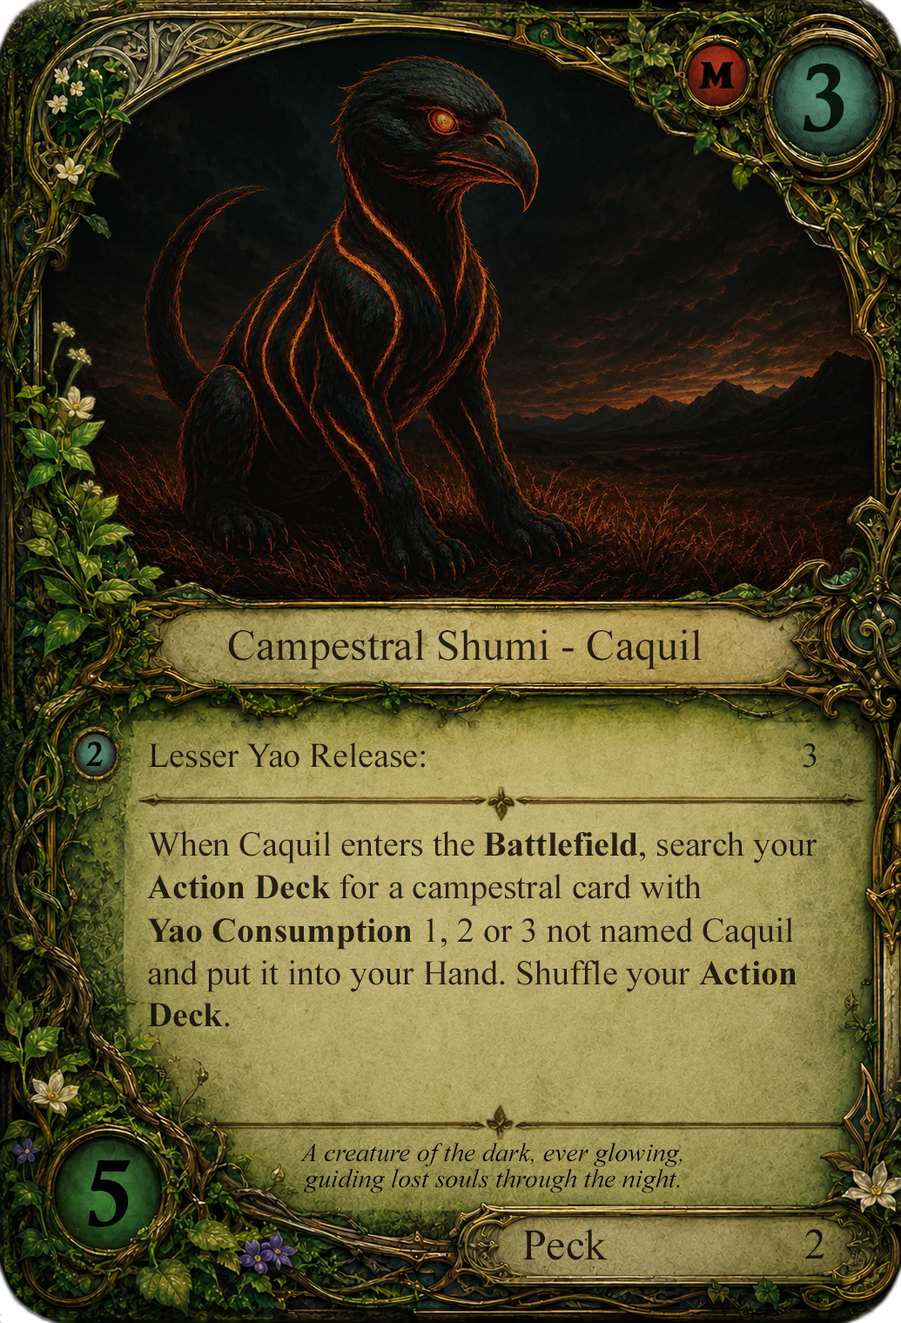
<style>
.page{position:relative;width:901px;height:1323px}
.page>*{position:absolute;margin:0}
.t1{font:95.8px "CalisMTBol";color:#000000}
.t2{font:43.5px "TimesNewRomanPSMT";color:#221d0d}
.t3{font:34.8px "CalisMTBol";color:#000000}
.t4{font:34.8px "TimesNewRomanPSMT";color:#201d0c}
.t5{font:34.8px/41.8px "TimesNewRomanPSMT";color:#221f10}
.t6{font:34.8px/41.8px "TimesNewRomanPS-BoldMT";color:#221f10}
.t7{font:26.1px/26.1px "TimesNewRomanPS-ItalicMT";color:#000000}
.t8{font:43.5px "TimesNewRomanPSMT";color:#1c190c}
.t9{font:43.5px "TimesNewRomanPSMT";color:#000000}
</style>
<div class="page">
<p class="t1" style="left:803px;top:64px;width:41px;height:68px;opacity:0.9">3</p>
<p class="t2" style="left:228px;top:629px;width:474px;height:41px">Campestral Shumi - Caquil</p>
<p class="t3" style="left:86px;top:742px;width:17px;height:25px">2</p>
<p class="t4" style="left:148px;top:743px;width:669px;height:25px">Lesser Yao Release:                                           3</p>
<p class="t5" style="left:147px;top:831px;width:671px;height:196px">When Caquil enters the <span class="t6">Battlefield</span>, search your<br><span class="t6">Action Deck</span> for a campestral card with <br><span class="t6">Yao Consumption</span> 1, 2 or 3 not named Caquil<br>and put it into your Hand. Shuffle your <span class="t6">Action Deck</span>.</p>
<p class="t7" style="left:300px;top:1143px;width:383px;height:51px;text-align:center">A creature of the dark, ever glowing, <br>guiding lost souls through the night.</p>
<p class="t1" style="left:88px;top:1160px;width:43px;height:68px">5</p>
<p class="t8" style="left:522px;top:1229px;width:86px;height:32px">Peck</p>
<p class="t9" style="left:805px;top:1229px;width:19px;height:30px;opacity:0.9">2</p>
</div>
